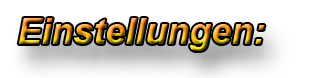
<style>
.page{position:relative;width:325px;height:78px;background:#ffffff}
.page>*{position:absolute;margin:0}
.t1{font:36px "Arial-BoldItalicMT"}
</style>
<div class="page">
<p class="t1" style="left:18px;top:18px;width:247px;height:33px">Einstellungen:</p>
</div>
